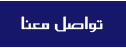
<style>
.page{position:relative;width:126px;height:48px;background:#16166b}
.page>*{position:absolute;margin:0}
.t1{font:20px "SC_KHALID";color:#ffffff;scale:1.07 1}
</style>
<div class="page">
<p class="t1" style="left:21px;top:16px;width:82px;height:17px">تواصل  معنا</p>
</div>
